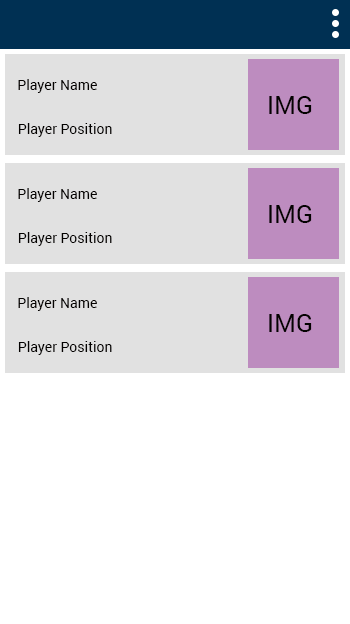
<style>
.page{position:relative;width:350px;height:624px;background:#ffffff}
.page>*{position:absolute;margin:0}
.t1{font:14px "Roboto-Regular";color:#040201}
.t2{font:25px "Roboto-Regular";color:#040201}
</style>
<div class="page">
<p class="t1" style="left:18px;top:79px;width:79px;height:14px">Player Name</p>
<p class="t2" style="left:269px;top:96px;width:43px;height:18px">IMG</p>
<p class="t1" style="left:18px;top:123px;width:94px;height:14px">Player Position</p>
<p class="t1" style="left:18px;top:188px;width:79px;height:14px">Player Name</p>
<p class="t2" style="left:269px;top:205px;width:43px;height:18px">IMG</p>
<p class="t1" style="left:18px;top:232px;width:94px;height:14px">Player Position</p>
<p class="t1" style="left:18px;top:297px;width:79px;height:14px">Player Name</p>
<p class="t2" style="left:269px;top:314px;width:43px;height:18px">IMG</p>
<p class="t1" style="left:18px;top:341px;width:94px;height:14px">Player Position</p>
</div>
